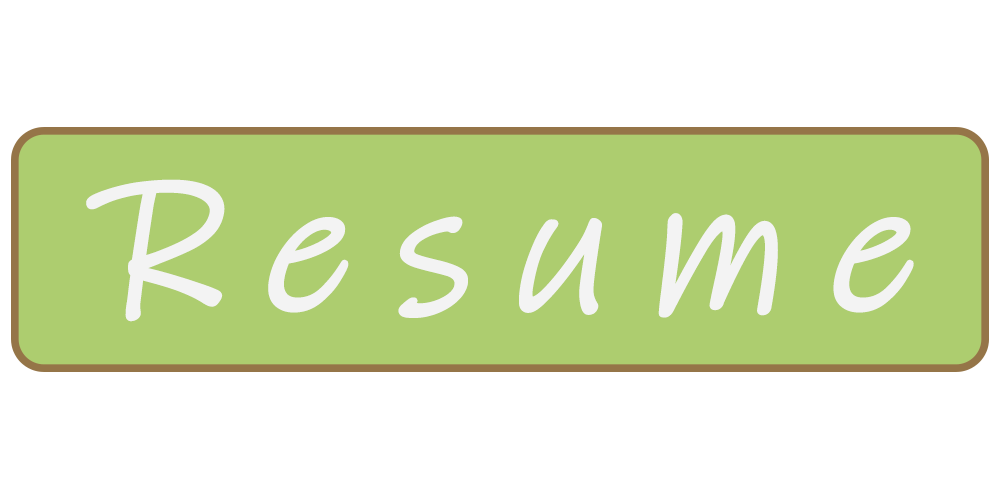
<style>
.page{position:relative;width:1000px;height:500px;background:#ffffff}
.page>*{position:absolute;margin:0}
.t1{font:184px "InkFree";letter-spacing:0.2em;color:#f4f4f4;font-weight:bold;font-style:italic}
</style>
<div class="page">
<p class="t1" style="left:86px;top:179px;width:828px;height:143px">Resume</p>
</div>
